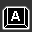
<style>
.page{position:relative;width:32px;height:32px;background:#000000}
.page>*{position:absolute;margin:0}
.t1{font:14px "Arial-BoldMT";color:#ffffff}
</style>
<div class="page">
<p class="t1" style="left:11px;top:11px;width:9px;height:10px">A</p>
</div>
